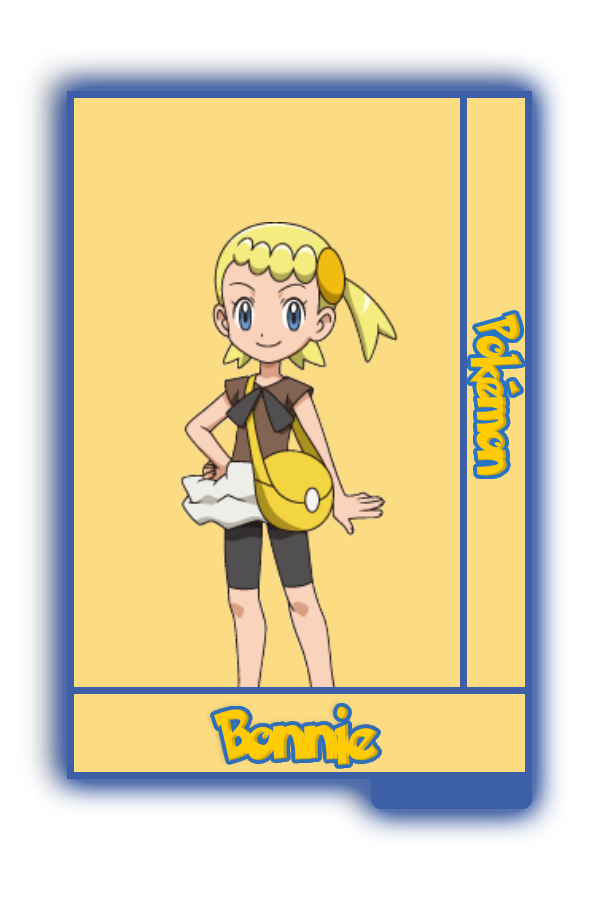
<style>
.page{position:relative;width:600px;height:900px;background:#fbdc83}
.page>*{position:absolute;margin:0}
.t1{font:48.8px "PokemonSolidNormal";color:#ffcb05;scale:0.8 1}
.t2{font:56.6px "PokemonSolidNormal";color:#ffcb05;scale:0.92 1}
</style>
<div class="page">
<p class="t1" style="left:469px;top:313px;width:54px;height:163px;rotate:90deg">Pokémon</p>
<p class="t2" style="left:214px;top:706px;width:165px;height:59px">Bonnie</p>
</div>
